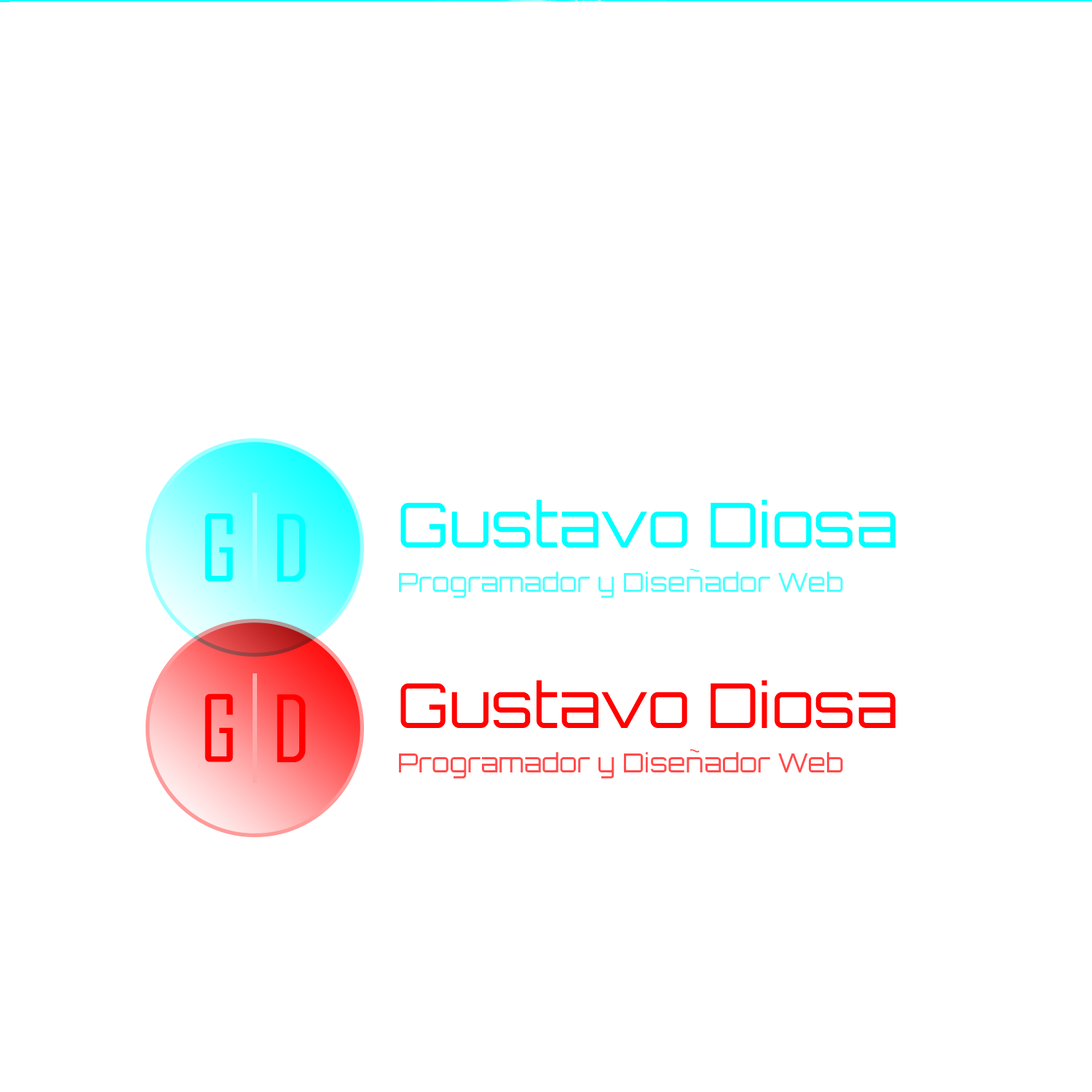
<style>
.page{position:relative;width:1092px;height:1092px;background:#ffffff}
.page>*{position:absolute;margin:0}
.t1{font:61.9px "Orbitron-Regular";color:#01ffff}
.t2{font:26.2px "Orbitron-Regular"}
</style>
<div class="page">
<p class="t1" style="left:400px;top:498px;width:495px;height:48px">Gustavo Diosa</p>
<p class="t2" style="left:399px;top:567px;width:444px;height:30px">Programador y Diseñador Web</p>
</div>
